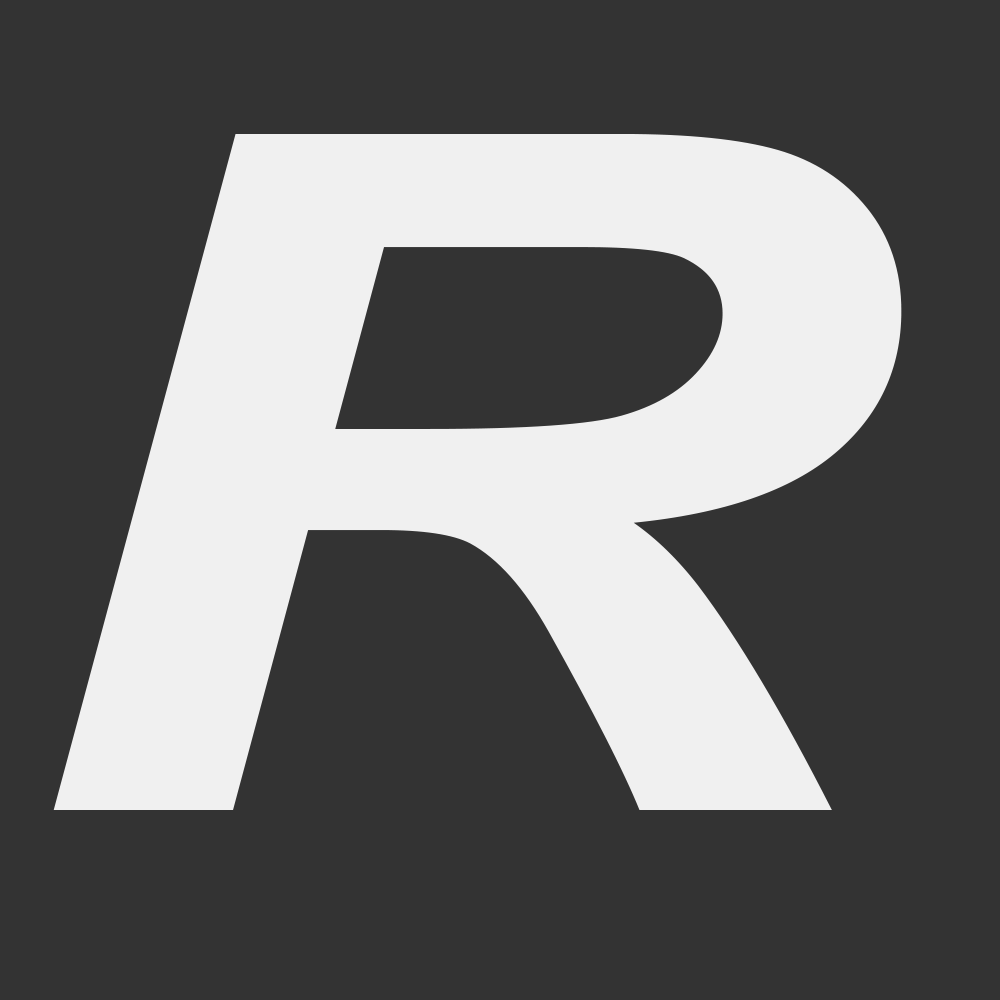
<style>
.page{position:relative;width:1000px;height:1000px;background:#333333}
.page>*{position:absolute;margin:0}
.t1{font:943.9px "Arial-BoldItalicMT";letter-spacing:0.1em;color:#f0f0f0;scale:1.29 1}
</style>
<div class="page">
<p class="t1" style="left:53px;top:134px;width:849px;height:676px">R</p>
</div>
